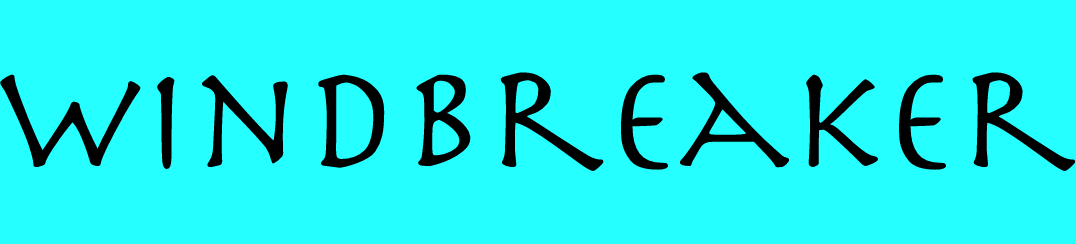
<style>
.page{position:relative;width:1076px;height:244px;background:#26ffff}
.page>*{position:absolute;margin:0}
.t1{font:151.7px "Herculanum";color:#000000}
</style>
<div class="page">
<p class="t1" style="left:0px;top:72px;width:1076px;height:99px">Windbreaker</p>
</div>
